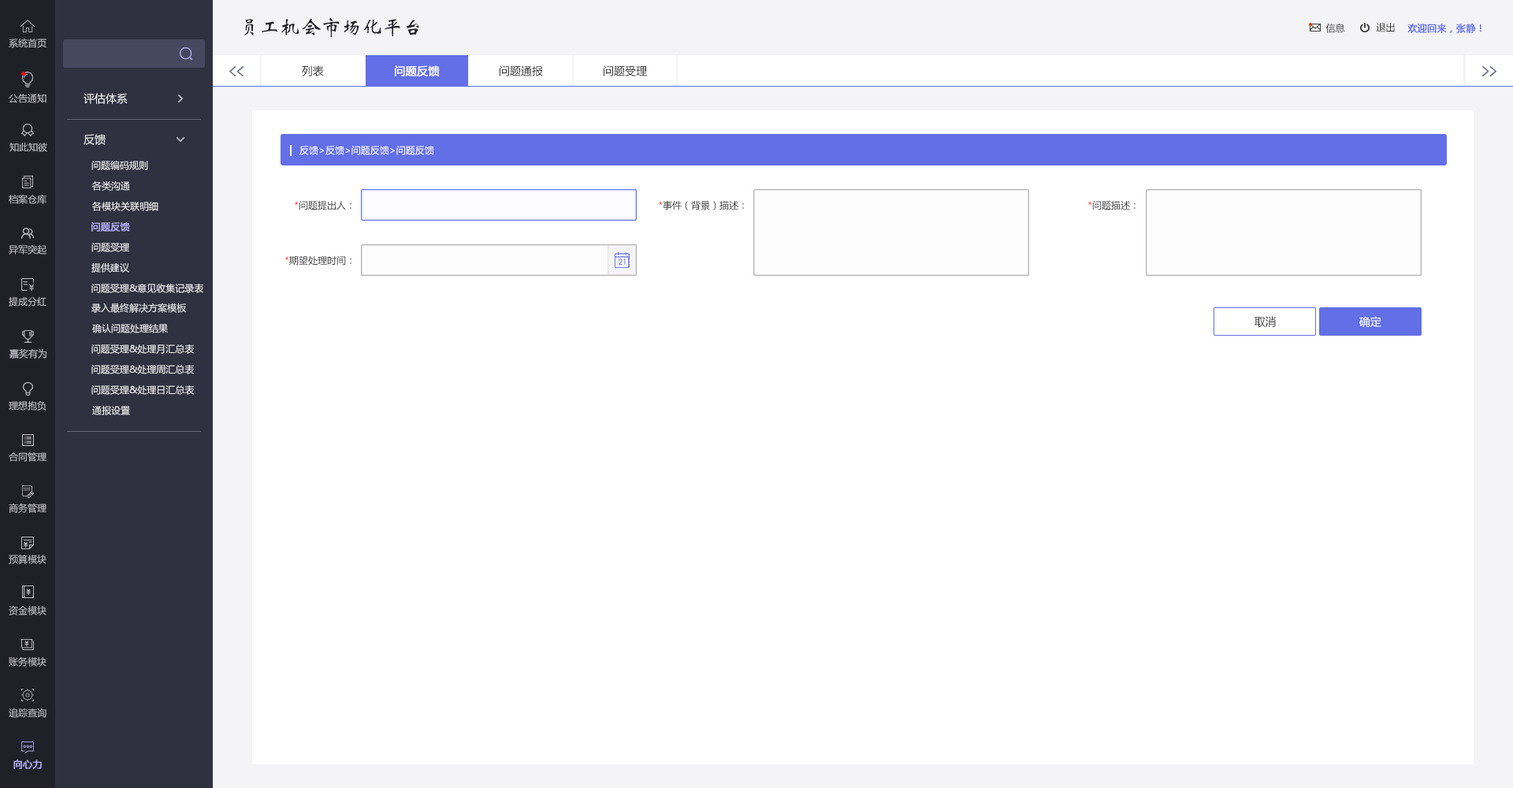
<style>
.page{position:relative;width:1513px;height:788px;background:#ffffff}
.page>*{position:absolute;margin:0}
.t1{font:20.5px "STXinwei";color:#202028}
.t2{font:9.5px "MicrosoftYaHei";color:#333333}
.t3{font:9.5px "MicrosoftYaHei";color:#636fe7;font-weight:bold}
.t4{font:9.5px "MicrosoftYaHei";color:#bfbec9}
.t5{font:11px "MicrosoftYaHei";color:#333333}
.t6{font:11px "MicrosoftYaHei";color:#ffffff;font-weight:bold}
.t7{font:11px "MicrosoftYaHei";color:#f4f4f6}
.t8{font:9.5px "MicrosoftYaHei";color:#ffffff}
.t9{font:9.5px "MicrosoftYaHei";color:#f4f4f6}
.t10{font:9.5px "MicrosoftYaHei";color:#ff0101}
.t11{font:9.5px "MicrosoftYaHei";color:#b3aef5;font-weight:bold}
.t12{font:11px "MicrosoftYaHei";color:#ffffff}
</style>
<div class="page">
<p class="t1" style="left:244px;top:17px;width:175px;height:20px">员工机会市场化平台</p>
<p class="t2" style="left:1326px;top:24px;width:19px;height:9px">信息</p>
<p class="t2" style="left:1376px;top:23px;width:19px;height:9px">退出</p>
<p class="t3" style="left:1407px;top:24px;width:75px;height:9px">欢迎回来，张静！</p>
<p class="t4" style="left:9px;top:38px;width:37px;height:10px">系统首页</p>
<p class="t5" style="left:302px;top:65px;width:22px;height:11px">列表</p>
<p class="t6" style="left:395px;top:65px;width:45px;height:11px">问题反馈</p>
<p class="t5" style="left:500px;top:65px;width:43px;height:11px">问题通报</p>
<p class="t5" style="left:604px;top:65px;width:43px;height:11px">问题受理</p>
<p class="t4" style="left:9px;top:94px;width:37px;height:9px">公告通知</p>
<p class="t7" style="left:84px;top:93px;width:44px;height:11px">评估体系</p>
<p class="t7" style="left:84px;top:134px;width:22px;height:11px">反馈</p>
<p class="t4" style="left:9px;top:143px;width:38px;height:9px">知此知彼</p>
<p class="t8" style="left:299px;top:146px;width:135px;height:9px">反馈&gt;反馈&gt;问题反馈&gt;问题反馈</p>
<p class="t9" style="left:91px;top:161px;width:57px;height:9px">问题编码规则</p>
<p class="t9" style="left:92px;top:181px;width:38px;height:10px">各类沟通</p>
<p class="t4" style="left:9px;top:194px;width:37px;height:10px">档案仓库</p>
<p class="t9" style="left:92px;top:202px;width:66px;height:9px">各模块关联明细</p>
<p class="t2" style="left:295px;top:200px;width:56px;height:10px"><span class="t10">*</span>问题提出人：</p>
<p class="t2" style="left:659px;top:200px;width:85px;height:10px"><span class="t10">*</span>事件（背景）描述：</p>
<p class="t2" style="left:1088px;top:200px;width:48px;height:10px"><span class="t10">*</span>问题描述：</p>
<p class="t11" style="left:91px;top:222px;width:39px;height:10px">问题反馈</p>
<p class="t4" style="left:9px;top:244px;width:37px;height:11px">异军突起</p>
<p class="t9" style="left:91px;top:243px;width:38px;height:9px">问题受理</p>
<p class="t2" style="left:285px;top:255px;width:66px;height:11px"><span class="t10">*</span>期望处理时间：</p>
<p class="t9" style="left:91px;top:263px;width:38px;height:10px">提供建议</p>
<p class="t9" style="left:91px;top:284px;width:112px;height:9px">问题受理&amp;意见收集记录表</p>
<p class="t4" style="left:9px;top:296px;width:37px;height:11px">提成分红</p>
<p class="t9" style="left:91px;top:303px;width:95px;height:10px">录入最终解决方案模板</p>
<p class="t5" style="left:1255px;top:316px;width:21px;height:12px">取消</p>
<p class="t12" style="left:1359px;top:316px;width:22px;height:12px">确定</p>
<p class="t9" style="left:92px;top:324px;width:76px;height:9px">确认问题处理结果</p>
<p class="t4" style="left:9px;top:349px;width:37px;height:10px">嘉奖有为</p>
<p class="t9" style="left:91px;top:344px;width:103px;height:10px">问题受理&amp;处理月汇总表</p>
<p class="t9" style="left:91px;top:365px;width:103px;height:9px">问题受理&amp;处理周汇总表</p>
<p class="t9" style="left:91px;top:385px;width:103px;height:10px">问题受理&amp;处理日汇总表</p>
<p class="t4" style="left:9px;top:401px;width:37px;height:10px">理想抱负</p>
<p class="t9" style="left:92px;top:406px;width:38px;height:9px">通报设置</p>
<p class="t4" style="left:9px;top:452px;width:37px;height:10px">合同管理</p>
<p class="t4" style="left:9px;top:503px;width:37px;height:10px">商务管理</p>
<p class="t4" style="left:9px;top:555px;width:37px;height:9px">预算模块</p>
<p class="t4" style="left:9px;top:605px;width:37px;height:10px">资金模块</p>
<p class="t4" style="left:9px;top:656px;width:37px;height:11px">账务模块</p>
<p class="t4" style="left:9px;top:708px;width:37px;height:10px">追踪查询</p>
<p class="t11" style="left:13px;top:760px;width:29px;height:9px">向心力</p>
</div>
